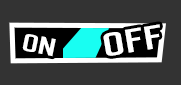
<style>
.page{position:relative;width:181px;height:85px;background:#333333}
.page>*{position:absolute;margin:0}
.t1{font:48px "Dhurjati";color:#ffffff}
.t2{font:36px "Dhurjati";color:#ffffff}
</style>
<div class="page">
<p class="t1" style="left:103px;top:24px;width:57px;height:32px;rotate:-10deg">OFF</p>
<p class="t2" style="left:22px;top:34px;width:34px;height:23px;rotate:12deg">ON</p>
</div>
